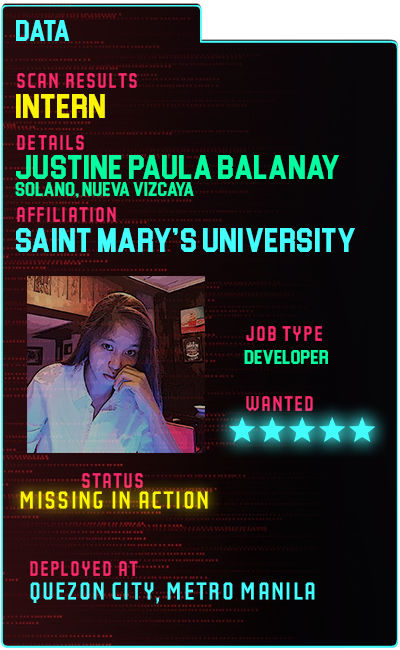
<style>
.page{position:relative;width:400px;height:650px}
.page>*{position:absolute;margin:0}
.t1{font:30px "Blockletter";color:#43ffff}
.t2{font:35px "Party-Lights-[WLM]-Flat";color:#ff296d}
.t3{font:35px "Blockletter";color:#fdf500}
.t4{font:35px "Blockletter";color:#00ff9f}
.t5{font:20px "Blockletter";color:#00ff9f}
.t6{font:35px "Blockletter";color:#43ffff}
.t7{font:42px "Party-Lights-[WLM]-Flat";color:#fdf500}
.t8{font:42px "Party-Lights-[WLM]-Flat";color:#43ffff}
</style>
<div class="page">
<p class="t1" style="left:16px;top:20px;width:54px;height:21px">DATA</p>
<p class="t2" style="left:17px;top:73px;width:120px;height:15px">Scan REsults</p>
<p class="t3" style="left:16px;top:94px;width:89px;height:24px">Intern</p>
<p class="t2" style="left:17px;top:135px;width:67px;height:15px">details</p>
<p class="t4" style="left:16px;top:155px;width:323px;height:24px">justine paula balanay</p>
<p class="t5" style="left:15px;top:182px;width:179px;height:16px">solano, nueva vizcaya</p>
<p class="t2" style="left:17px;top:207px;width:99px;height:15px">AFFILIATION</p>
<p class="t6" style="left:16px;top:228px;width:339px;height:24px">saint mary’s university</p>
<p class="t2" style="left:246px;top:326px;width:76px;height:15px">job type</p>
<p class="t5" style="left:244px;top:350px;width:84px;height:14px">developer</p>
<p class="t2" style="left:246px;top:396px;width:67px;height:15px">wanted</p>
<p class="t2" style="left:82px;top:473px;width:61px;height:15px">status</p>
<p class="t7" style="left:20px;top:491px;width:188px;height:18px">missing in action</p>
<p class="t2" style="left:30px;top:561px;width:108px;height:15px">deployed at</p>
<p class="t8" style="left:30px;top:582px;width:285px;height:22px">quezon city, Metro manila</p>
</div>
